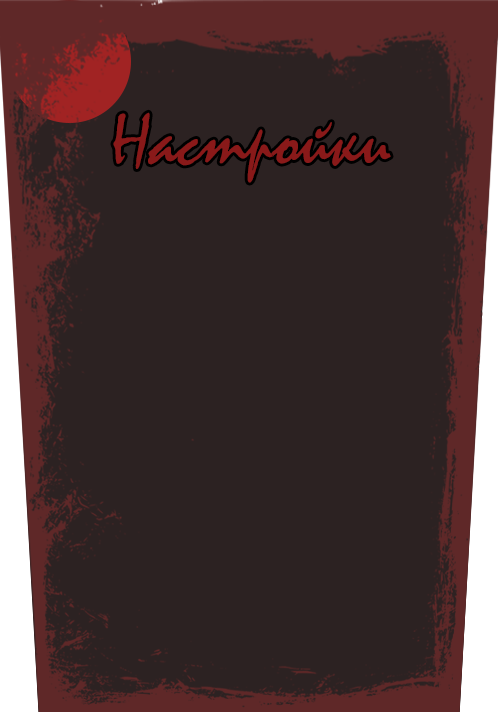
<style>
.page{position:relative;width:498px;height:712px;background:#2c2222}
.page>*{position:absolute;margin:0}
.t1{font:75px "Mistral";color:#891919}
</style>
<div class="page">
<p class="t1" style="left:113px;top:112px;width:278px;height:71px">Настройки</p>
</div>
